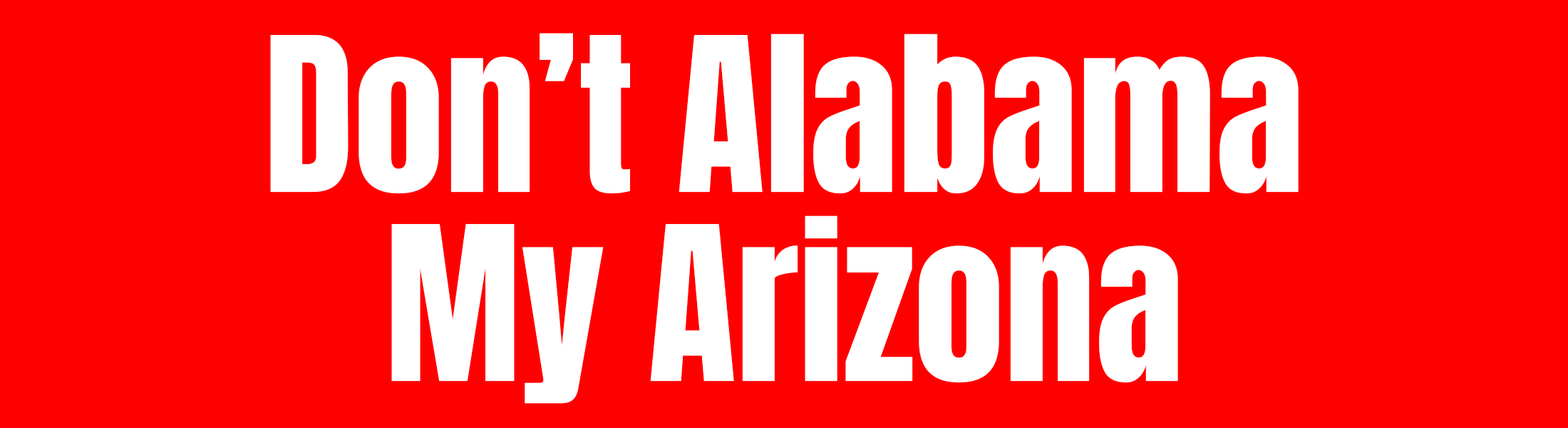
<style>
.page{position:relative;width:1568px;height:428px;background:#ff0000}
.page>*{position:absolute;margin:0}
.t1{font:182.5px "Anton-Regular";color:#ffffff}
</style>
<div class="page">
<p class="t1" style="left:270px;top:33px;width:1029px;height:161px">Don’t Alabama</p>
<p class="t1" style="left:391px;top:215px;width:787px;height:188px">My Arizona</p>
</div>
